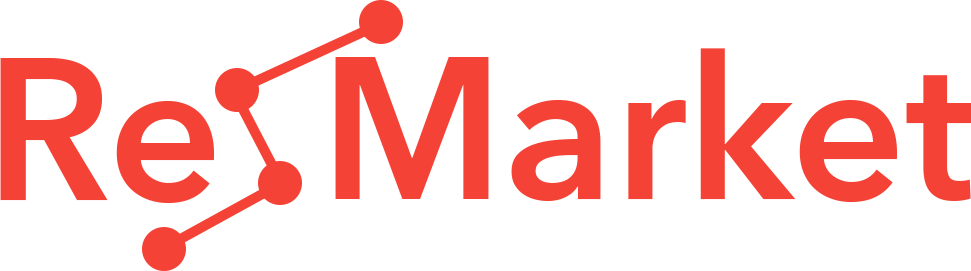
<style>
.page{position:relative;width:971px;height:271px;background:#ffffff}
.page>*{position:absolute;margin:0}
.t1{font:200px "AvenirNext-DemiBold";color:#f44336}
</style>
<div class="page">
<p class="t1" style="left:335px;top:48px;width:636px;height:154px">Market</p>
<p class="t1" style="left:0px;top:58px;width:214px;height:145px">Re</p>
</div>
